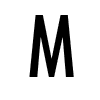
<style>
.page{position:relative;width:100px;height:100px;background:#ffffff}
.page>*{position:absolute;margin:0}
.t1{font:100px "TwCenMT-Condensed";color:#000000}
</style>
<div class="page">
<p class="t1" style="left:29px;top:15px;width:45px;height:62px">M</p>
</div>
